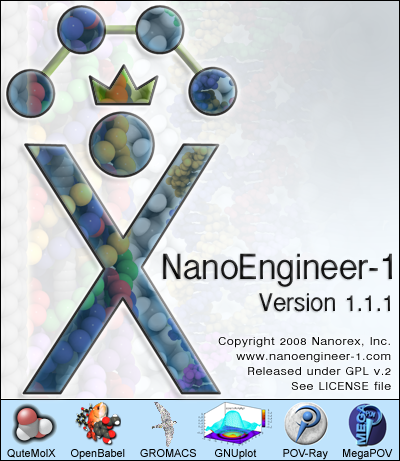
<style>
.page{position:relative;width:400px;height:461px}
.page>*{position:absolute;margin:0}
.t1{font:38px "InaiMathi";letter-spacing:-0.005em;color:#181818}
.t2{font:44px "InaiMathi";letter-spacing:-0.005em;color:#181818}
.t3{font:27px "InaiMathi";letter-spacing:-0.005em;color:#181818}
.t4{font:11.9px/15px "InaiMathi";letter-spacing:0.035em;color:#000000;scale:1.18 1}
.t5{font:11px "ArialMT";letter-spacing:-0.005em;color:#000000}
</style>
<div class="page">
<p class="t1" style="left:163px;top:253px;width:229px;height:59px;text-align:right">NanoEngineer-<span class="t2">1<br></span><span class="t3">Version 1.1.1</span></p>
<p class="t4" style="left:218px;top:337px;width:173px;height:53px;text-align:right">Copyright 2008 Nanorex, Inc.<br>www.nanoengineer-1.com<br>Released under GPL v.2<br>See LICENSE file</p>
<p class="t5" style="left:7px;top:449px;width:386px;height:11px">QuteMolX     OpenBabel     GROMACS      GNUplot        POV-Ray     MegaPOV</p>
</div>
